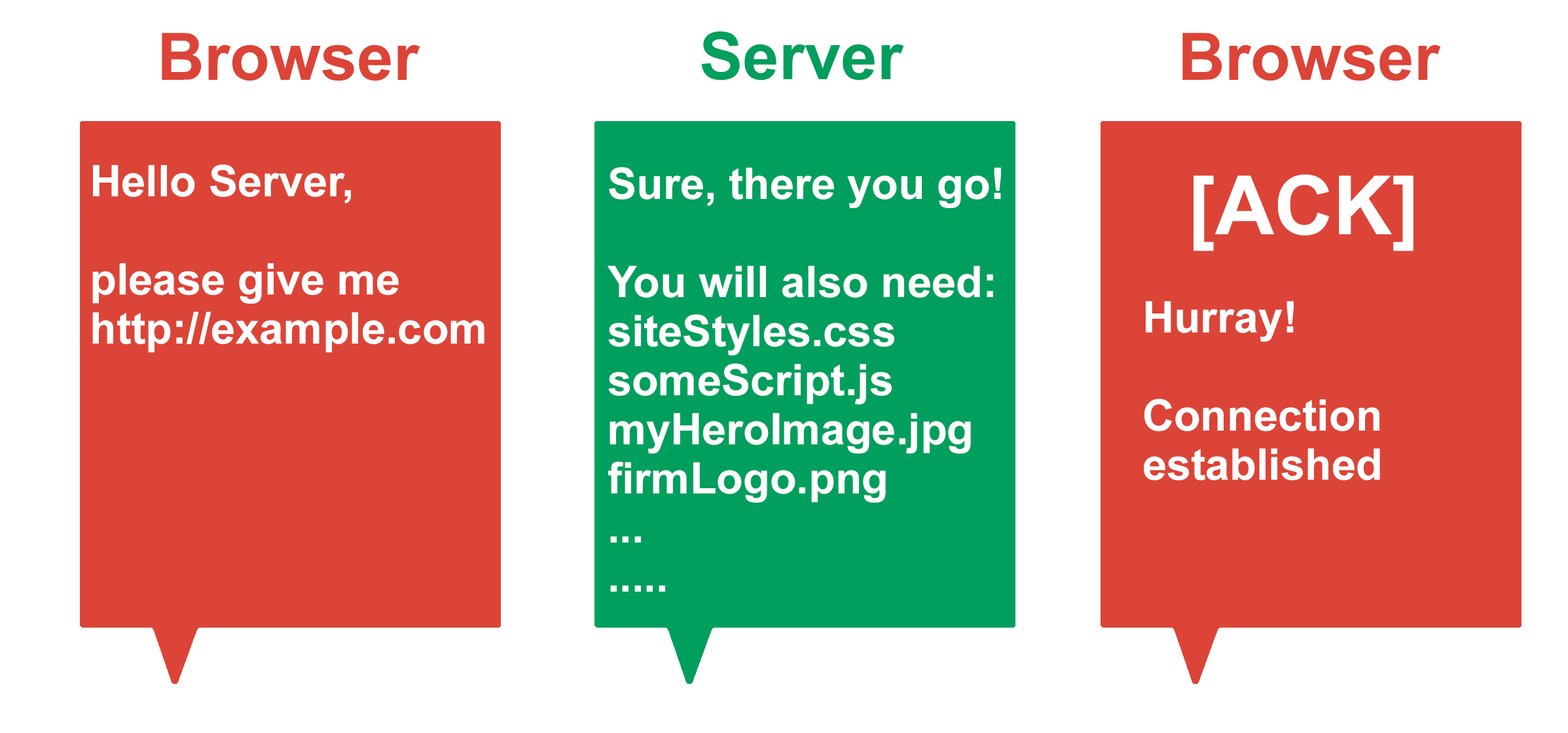
<style>
.page{position:relative;width:1568px;height:733px;background:#ffffff}
.page>*{position:absolute;margin:0}
.t1{font:65.5px "Arial-BoldMT";color:#dc4437}
.t2{font:65.5px "Arial-BoldMT";color:#009f5d}
.t3{font:43.6px/49.1px "Arial-BoldMT";color:#ffffff}
.t4{font:81.8px/49.1px "Arial-BoldMT";color:#ffffff}
</style>
<div class="page">
<p class="t1" style="left:162px;top:33px;width:258px;height:48px">Browser</p>
<p class="t2" style="left:701px;top:31px;width:203px;height:50px">Server</p>
<p class="t1" style="left:1182px;top:33px;width:259px;height:48px">Browser</p>
<p class="t3" style="left:92px;top:164px;width:392px;height:189px">Hello Server,<br><br>please give me<br>http://example.com</p>
<p class="t3" style="left:608px;top:167px;width:393px;height:425px">Sure, there you go!<br><br>You will also need:<br>siteStyles.css<br>someScript.js<br>myHeroImage.jpg<br>firmLogo.png<br>...<br>.....</p>
<p class="t3" style="left:1144px;top:174px;width:269px;height:307px"><span class="t4">  [ACK]<br><br></span>Hurray!<br><br>Connection<br>established</p>
</div>
